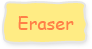
<style>
.page{position:relative;width:92px;height:49px;background:#ffec84}
.page>*{position:absolute;margin:0}
.t1{font:18px "ComicSansMS";color:#ff8047}
</style>
<div class="page">
<p class="t1" style="left:18px;top:16px;width:56px;height:14px">Eraser</p>
</div>
